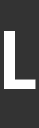
<style>
.page{position:relative;width:39px;height:128px;background:#333333}
.page>*{position:absolute;margin:0}
.t1{font:75px "AdobeGothicStd-Bold";color:#ffffff}
</style>
<div class="page">
<p class="t1" style="left:4px;top:31px;width:32px;height:58px">L</p>
</div>
